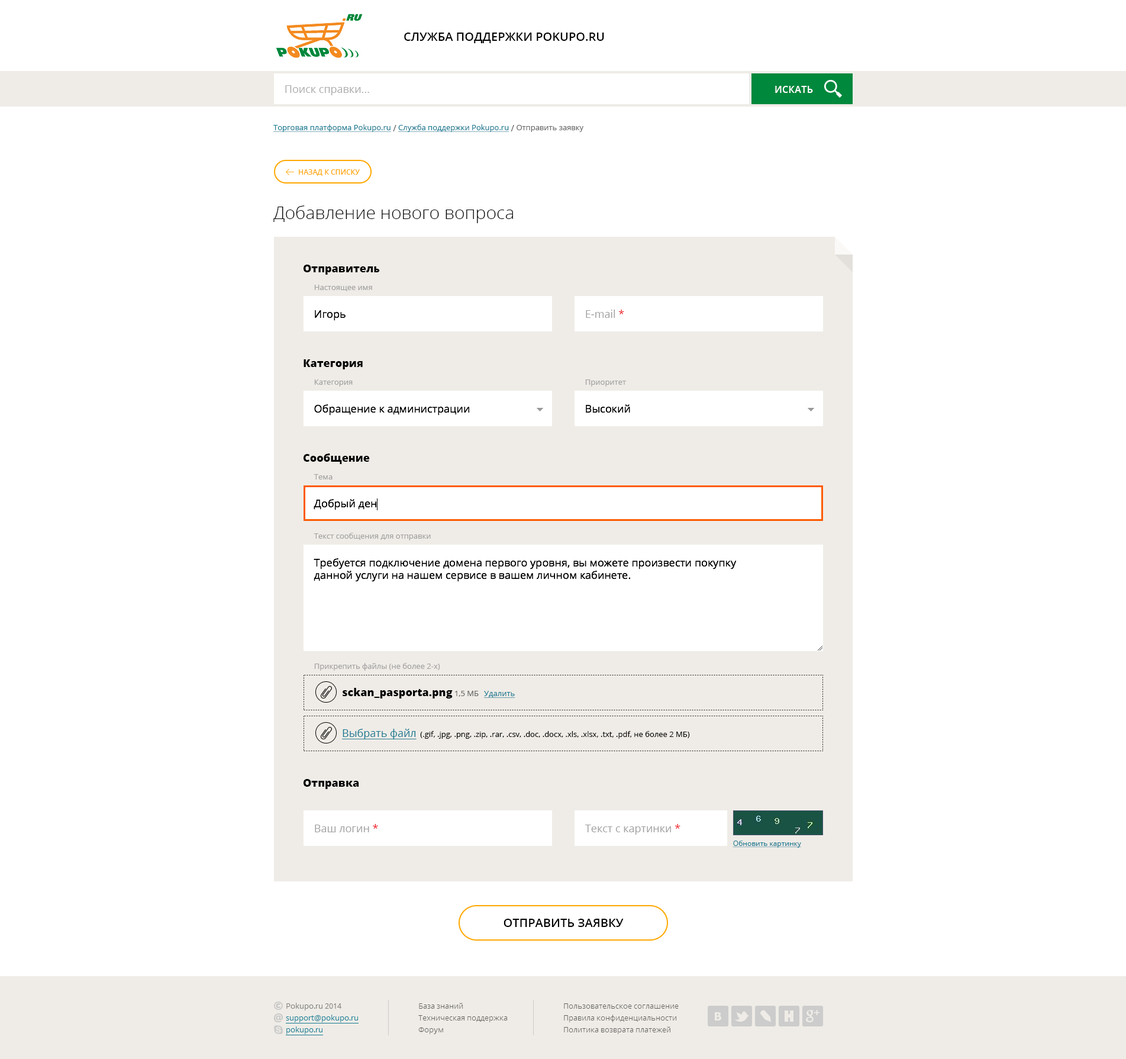
<style>
.page{position:relative;width:1126px;height:1059px;background:#ffffff}
.page>*{position:absolute;margin:0}
.t1{font:11.8px "OpenSans-Semibold";color:#000000;text-transform:uppercase}
.t2{font:10.7px "OpenSans";color:#adadad}
.t3{font:9.5px "OpenSans-Semibold";letter-spacing:0.025em;color:#ffffff;text-transform:uppercase}
.t4{font:7.7px "OpenSans";color:#177a93;text-decoration:underline}
.t5{font:8.9px "OpenSans";color:#666666}
.t6{font:7.7px "OpenSans";color:#666666}
.t7{font:7.1px "OpenSans-Semibold";color:#ffa800;text-transform:uppercase}
.t8{font:17.8px "OpenSans-Light";color:#000000}
.t9{font:10.7px "OpenSans-Extrabold";color:#000000}
.t10{font:7.7px "OpenSans";color:#a1a1a1}
.t11{font:10.7px "OpenSans";color:#000000}
.t12{font:10.7px "OpenSans";color:#a1a1a1}
.t13{font:10.7px "OpenSans";color:#ed1c24}
.t14{font:7.7px "OpenSans";color:#000000}
.t15{font:10.7px "OpenSans";color:#177a93;text-decoration:underline}
.t16{font:7.1px "OpenSans";color:#177a93;text-decoration:underline}
</style>
<div class="page">
<p class="t1" style="left:404px;top:33px;width:200px;height:10px">Служба поддержки Pokupo.ru</p>
<p class="t2" style="left:285px;top:85px;width:84px;height:10px">Поиск справки...</p>
<p class="t3" style="left:775px;top:86px;width:38px;height:7px">искать</p>
<p class="t4" style="left:273px;top:124px;width:311px;height:8px">Торговая платформа Pokupo.ru <span class="t5">/ </span>Служба поддержки Pokupo.ru <span class="t5">/</span><span class="t6"> Отправить заявку</span></p>
<p class="t7" style="left:299px;top:169px;width:61px;height:7px">назад к списку</p>
<p class="t8" style="left:273px;top:205px;width:240px;height:18px">Добавление нового вопроса</p>
<p class="t9" style="left:303px;top:265px;width:77px;height:10px">Отправитель</p>
<p class="t10" style="left:314px;top:285px;width:58px;height:6px">Настоящее имя</p>
<p class="t11" style="left:315px;top:310px;width:31px;height:11px">Игорь</p>
<p class="t12" style="left:586px;top:310px;width:38px;height:8px">E-mail <span class="t13">*</span></p>
<p class="t9" style="left:304px;top:359px;width:59px;height:10px">Категория</p>
<p class="t10" style="left:314px;top:379px;width:39px;height:7px">Категория</p>
<p class="t10" style="left:585px;top:379px;width:41px;height:7px">Приоритет</p>
<p class="t11" style="left:314px;top:404px;width:156px;height:11px">Обращение к администрации</p>
<p class="t11" style="left:586px;top:404px;width:44px;height:9px">Высокий</p>
<p class="t9" style="left:303px;top:453px;width:67px;height:11px">Сообщение</p>
<p class="t10" style="left:314px;top:474px;width:19px;height:5px">Тема</p>
<p class="t11" style="left:314px;top:499px;width:63px;height:11px">Добрый ден</p>
<p class="t10" style="left:314px;top:533px;width:117px;height:7px">Текст сообщения для отправки</p>
<p class="t11" style="left:314px;top:558px;width:423px;height:24px">Требуется подключение домена первого уровня, вы можете произвести покупку<br>данной услуги на нашем сервисе в вашем личном кабинете.</p>
<p class="t10" style="left:314px;top:663px;width:126px;height:8px">Прикрепить файлы (не более 2-х)</p>
<p class="t9" style="left:343px;top:688px;width:136px;height:10px">sckan_pasporta.png <span class="t6">1,5 МБ</span></p>
<p class="t4" style="left:484px;top:691px;width:31px;height:7px">Удалить</p>
<p class="t14" style="left:342px;top:729px;width:348px;height:10px"><span class="t15">Выбрать файл</span>  (.gif, .jpg, .png, .zip, .rar, .csv, .doc, .docx, .xls, .xlsx, .txt, .pdf, не более 2 МБ)</p>
<p class="t9" style="left:303px;top:779px;width:56px;height:10px">Отправка</p>
<p class="t12" style="left:315px;top:824px;width:63px;height:8px">Ваш логин <span class="t13">*</span></p>
<p class="t12" style="left:585px;top:824px;width:96px;height:10px">Текст с картинки <span class="t13">*</span></p>
<p class="t16" style="left:733px;top:840px;width:68px;height:7px">Обновить картинку</p>
<p class="t1" style="left:504px;top:919px;width:120px;height:8px">Отправить заявку</p>
</div>
